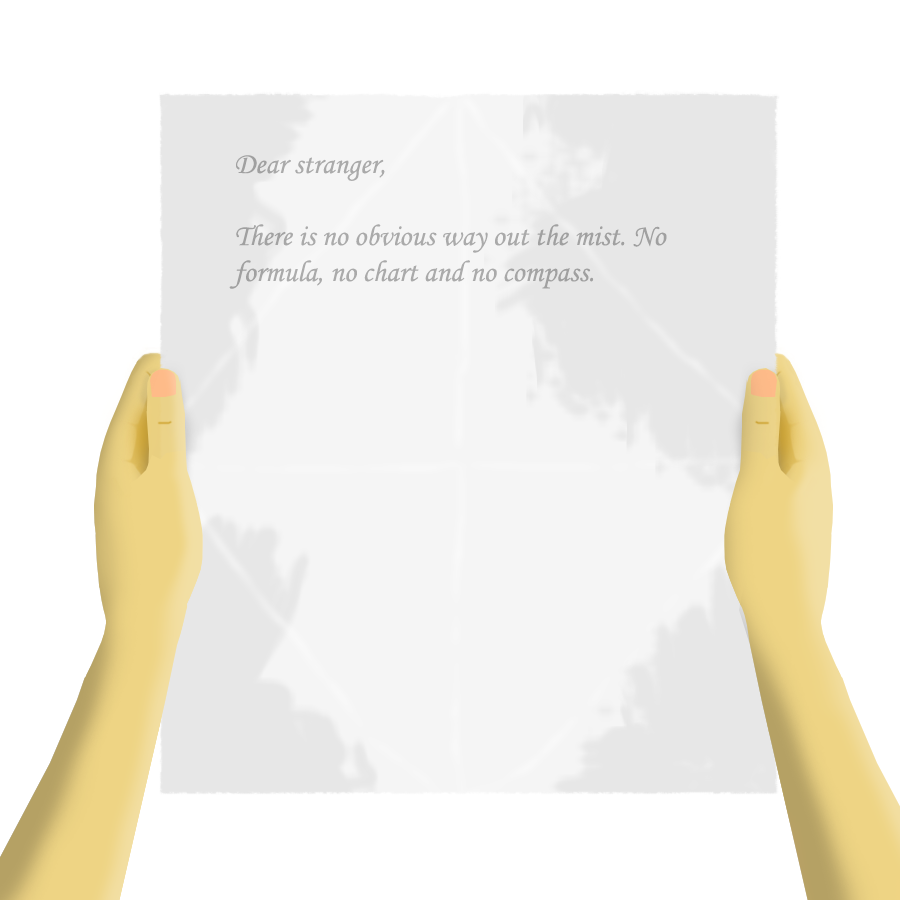
<style>
.page{position:relative;width:900px;height:900px;background:#ffffff}
.page>*{position:absolute;margin:0}
.t1{font:30px "MonotypeCorsiva";color:#aaaaaa}
</style>
<div class="page">
<p class="t1" style="left:229px;top:155px;width:438px;height:134px">Dear stranger,<br><br>There is no obvious way out the mist. No<br>formula, no chart and no compass.</p>
</div>
